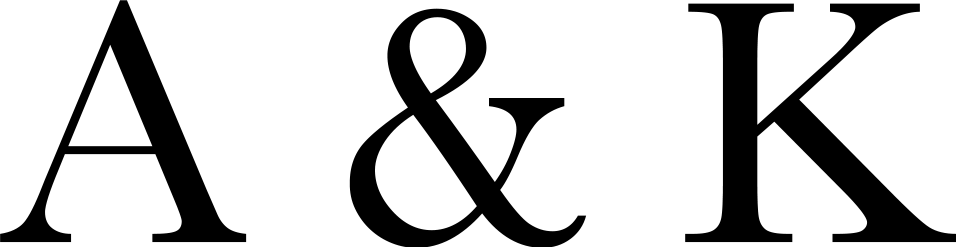
<style>
.page{position:relative;width:956px;height:247px;background:#ffffff}
.page>*{position:absolute;margin:0}
.t1{font:360px "Baskerville";color:#000000}
</style>
<div class="page">
<p class="t1" style="left:0px;top:0px;width:957px;height:248px">A &amp; K</p>
</div>
